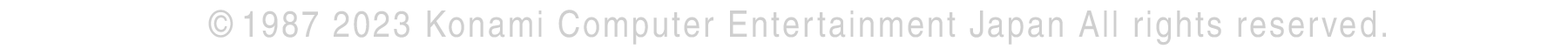
<style>
.page{position:relative;width:1568px;height:49px;background:#ffffff}
.page>*{position:absolute;margin:0}
.t1{font:36.3px "Helvetica";letter-spacing:0.08em;color:#cfcfcf;scale:0.87 1}
</style>
<div class="page">
<p class="t1" style="left:208px;top:10px;width:25px;height:27px">©</p>
<p class="t1" style="left:244px;top:10px;width:165px;height:27px">1987 2023</p>
<p class="t1" style="left:427px;top:10px;width:959px;height:35px">Konami Computer Entertainment Japan All rights reserved.</p>
</div>
